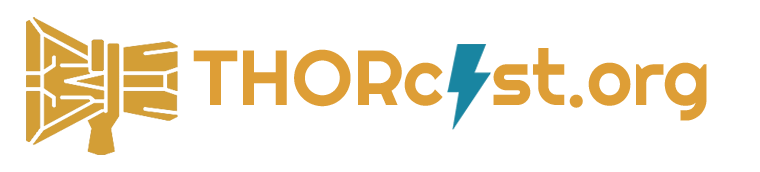
<style>
.page{position:relative;width:760px;height:172px;background:#ffffff}
.page>*{position:absolute;margin:0}
.t1{font:78px "Righteous-Regular";color:#de9e36}
</style>
<div class="page">
<p class="t1" style="left:193px;top:49px;width:250px;height:58px">THORc</p>
<p class="t1" style="left:493px;top:48px;width:214px;height:73px">st.org</p>
</div>
